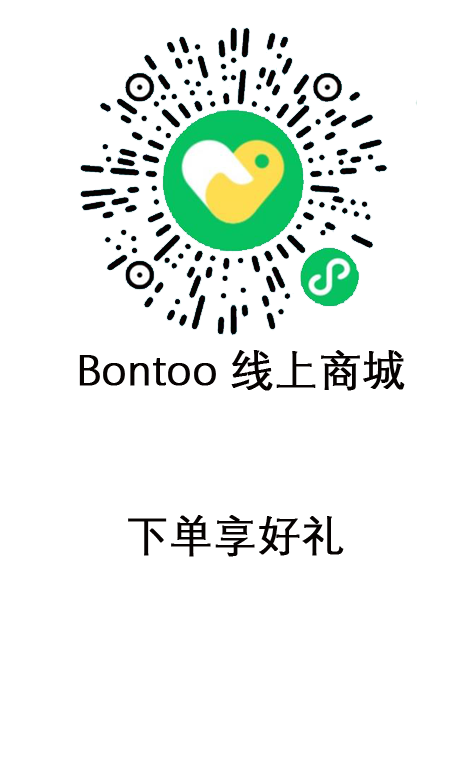
<style>
.page{position:relative;width:469px;height:760px;background:#ffffff}
.page>*{position:absolute;margin:0}
.t1{font:42.7px "DengXian";color:#060201;font-weight:bold}
</style>
<div class="page">
<p class="t1" style="left:79px;top:350px;width:326px;height:41px">Bontoo 线上商城</p>
<p class="t1" style="left:128px;top:515px;width:216px;height:42px">下单享好礼</p>
</div>
